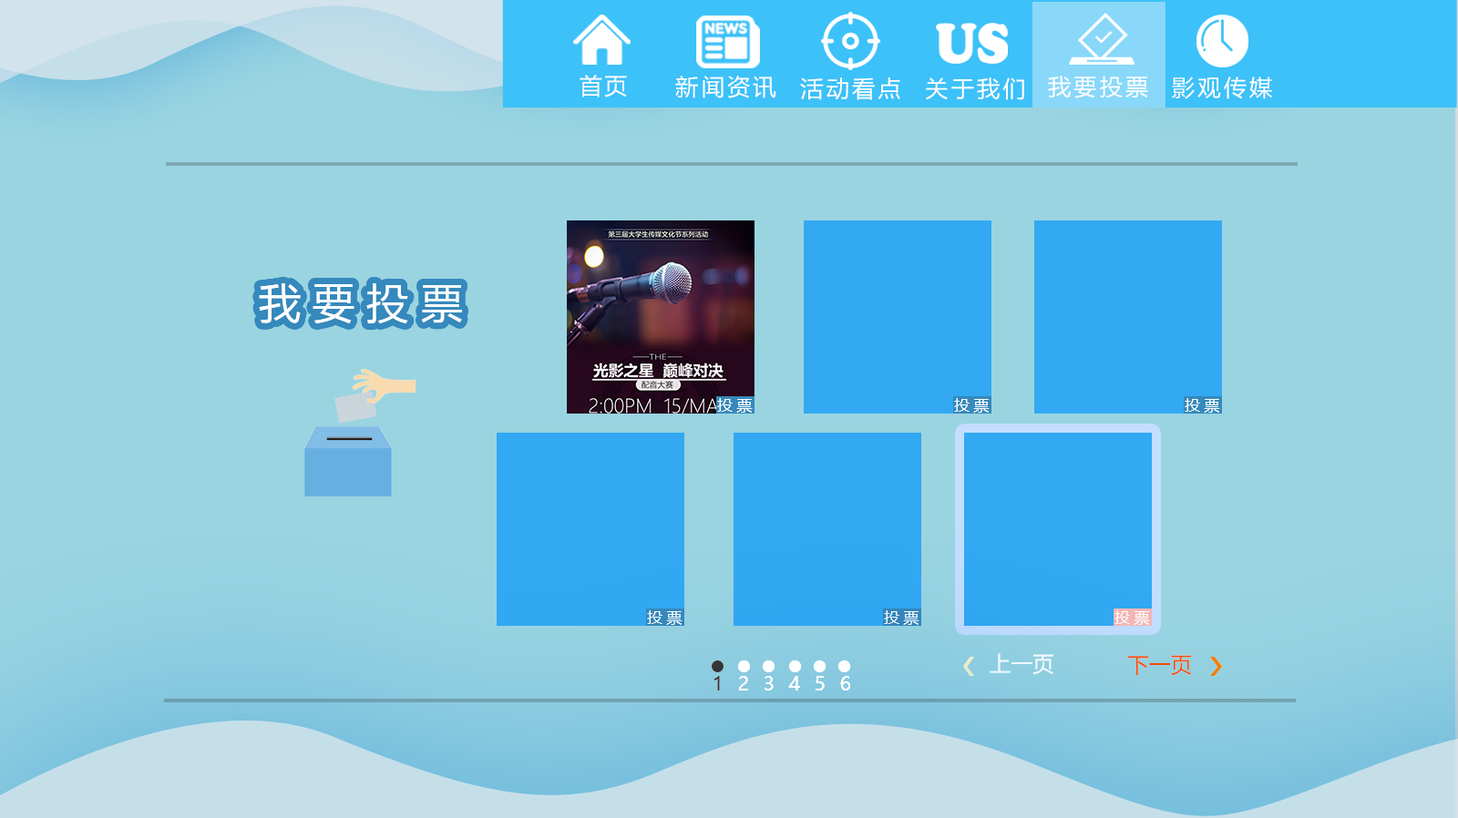
<style>
.page{position:relative;width:1458px;height:818px;background:#9ad4e1}
.page>*{position:absolute;margin:0}
.t1{font:22.8px "MicrosoftYaHei";letter-spacing:0.086em;color:#ffffff}
.t2{font:22.8px "MicrosoftYaHei";letter-spacing:0.126em;color:#ffffff;text-transform:uppercase}
.t3{font:41.8px "MicrosoftYaHei";letter-spacing:0.288em;color:#ffffff;text-transform:uppercase}
.t4{font:15.2px "MicrosoftYaHei";letter-spacing:0.288em;color:#ffffff;text-transform:uppercase}
.t5{font:21.3px "MicrosoftYaHei";letter-spacing:0.01em;color:#ffffff}
.t6{font:21.3px "MicrosoftYaHei";letter-spacing:0.01em;color:#f44d01}
.t7{font:21.3px "MicrosoftYaHei";letter-spacing:0.01em;color:#fe4e01}
.t8{font:19px "MicrosoftYaHei";letter-spacing:0.77em;color:#ffffff;text-transform:uppercase}
.t9{font:19px "MicrosoftYaHei";letter-spacing:0.77em;color:#353535;text-transform:uppercase}
</style>
<div class="page">
<p class="t1" style="left:579px;top:75px;width:48px;height:22px">首页</p>
<p class="t2" style="left:675px;top:76px;width:101px;height:22px">新闻资讯</p>
<p class="t2" style="left:800px;top:77px;width:100px;height:23px">活动看点</p>
<p class="t2" style="left:925px;top:77px;width:99px;height:23px">关于我们</p>
<p class="t2" style="left:1048px;top:76px;width:100px;height:22px">我要投票</p>
<p class="t2" style="left:1172px;top:77px;width:100px;height:22px">影观传媒</p>
<p class="t3" style="left:259px;top:283px;width:203px;height:40px">我要投票</p>
<p class="t3" style="left:259px;top:283px;width:203px;height:40px">我要投票</p>
<p class="t4" style="left:717px;top:398px;width:35px;height:15px">投票</p>
<p class="t4" style="left:717px;top:398px;width:35px;height:15px">投票</p>
<p class="t4" style="left:954px;top:398px;width:35px;height:15px">投票</p>
<p class="t4" style="left:954px;top:398px;width:35px;height:15px">投票</p>
<p class="t4" style="left:1184px;top:398px;width:36px;height:15px">投票</p>
<p class="t4" style="left:1184px;top:398px;width:36px;height:15px">投票</p>
<p class="t4" style="left:647px;top:610px;width:35px;height:15px">投票</p>
<p class="t4" style="left:647px;top:610px;width:35px;height:15px">投票</p>
<p class="t4" style="left:884px;top:610px;width:35px;height:15px">投票</p>
<p class="t4" style="left:884px;top:610px;width:35px;height:15px">投票</p>
<p class="t4" style="left:1114px;top:610px;width:36px;height:15px">投票</p>
<p class="t4" style="left:1114px;top:610px;width:36px;height:15px">投票</p>
<p class="t5" style="left:989px;top:653px;width:64px;height:22px">上一页</p>
<p class="t5" style="left:989px;top:653px;width:64px;height:22px">上一页</p>
<p class="t6" style="left:1127px;top:655px;width:65px;height:21px">下一页</p>
<p class="t7" style="left:1127px;top:655px;width:65px;height:21px">下一页</p>
<p class="t8" style="left:713px;top:676px;width:137px;height:15px">123456</p>
<p class="t8" style="left:713px;top:676px;width:137px;height:15px"><span class="t9">1</span>23456</p>
</div>
